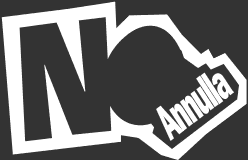
<style>
.page{position:relative;width:248px;height:160px;background:#333333}
.page>*{position:absolute;margin:0}
.t1{font:51.3px "FranklinGothic-Heavy";letter-spacing:-0.075em;color:#ffffff;scale:0.51 1}
</style>
<div class="page">
<p class="t1" style="left:156px;top:72px;width:78px;height:69px;rotate:-38deg">Annulla</p>
</div>
